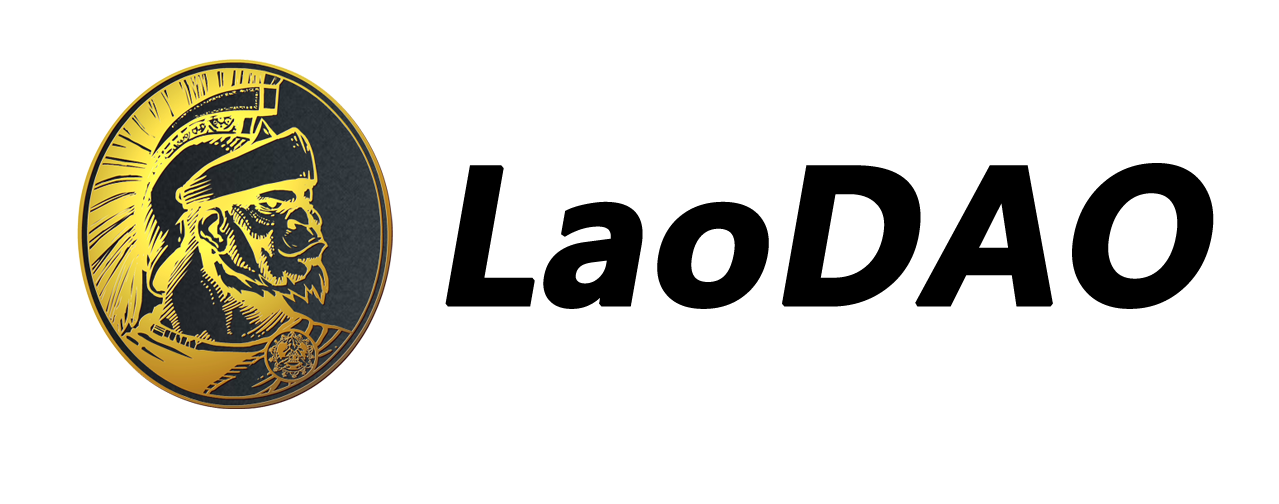
<style>
.page{position:relative;width:1279px;height:504px;background:#ffffff}
.page>*{position:absolute;margin:0}
.t1{font:180px "MicrosoftYaHei-Bold";color:#000000;font-weight:bold;font-style:italic}
</style>
<div class="page">
<p class="t1" style="left:445px;top:163px;width:769px;height:146px">LaoDAO</p>
</div>
